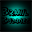
<style>
.page{position:relative;width:32px;height:32px}
.page>*{position:absolute;margin:0}
.t1{font:11px "SFSlapstickComicShaded";color:#000000;font-variant:small-caps}
.t2{font:9px "SFSlapstickComicShaded";color:#000000;font-variant:small-caps}
</style>
<div class="page">
<p class="t1" style="left:1px;top:7px;width:28px;height:10px">Brawl</p>
<p class="t2" style="left:1px;top:16px;width:30px;height:9px">Buddies</p>
</div>
